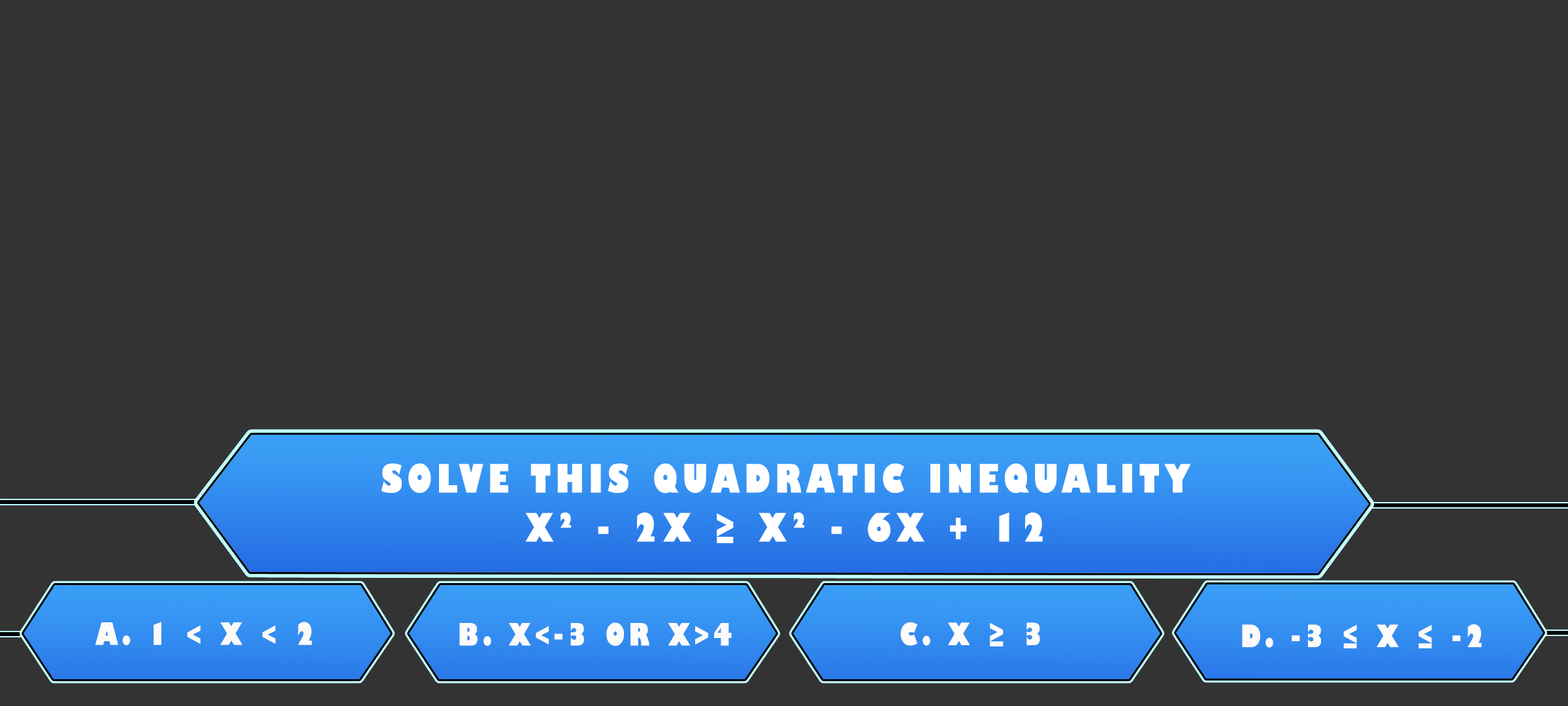
<style>
.page{position:relative;width:1568px;height:706px;background:#333333}
.page>*{position:absolute;margin:0}
.t1{font:38.1px/49px "GillSans-UltraBoldCondensed";letter-spacing:0.115em;color:#ffffff;text-transform:uppercase;scale:1.12 1}
.t2{font:29.9px "GillSans-UltraBoldCondensed";letter-spacing:0.115em;color:#fdfafa;text-transform:uppercase;scale:1.12 1}
.t3{font:29.9px "GillSans-UltraBoldCondensed";letter-spacing:0.115em;color:#fcfafa;text-transform:uppercase;scale:1.12 1}
</style>
<div class="page">
<p class="t1" style="left:381px;top:463px;width:810px;height:80px;text-align:center">solve this quadratic inequality<br>x² - 2x ≥ x² - 6x + 12</p>
<p class="t2" style="left:95px;top:621px;width:217px;height:24px">a. 1 &lt; x &lt; 2</p>
<p class="t3" style="left:459px;top:622px;width:273px;height:23px">b. x&lt;-3 or x&gt;4</p>
<p class="t2" style="left:900px;top:622px;width:140px;height:24px">c. x ≥ 3</p>
<p class="t3" style="left:1242px;top:624px;width:240px;height:24px">d. -3 ≤ x ≤ -2</p>
</div>
